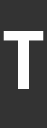
<style>
.page{position:relative;width:47px;height:128px;background:#333333}
.page>*{position:absolute;margin:0}
.t1{font:75px "AdobeGothicStd-Bold";color:#ffffff}
</style>
<div class="page">
<p class="t1" style="left:3px;top:31px;width:41px;height:58px">T</p>
</div>
